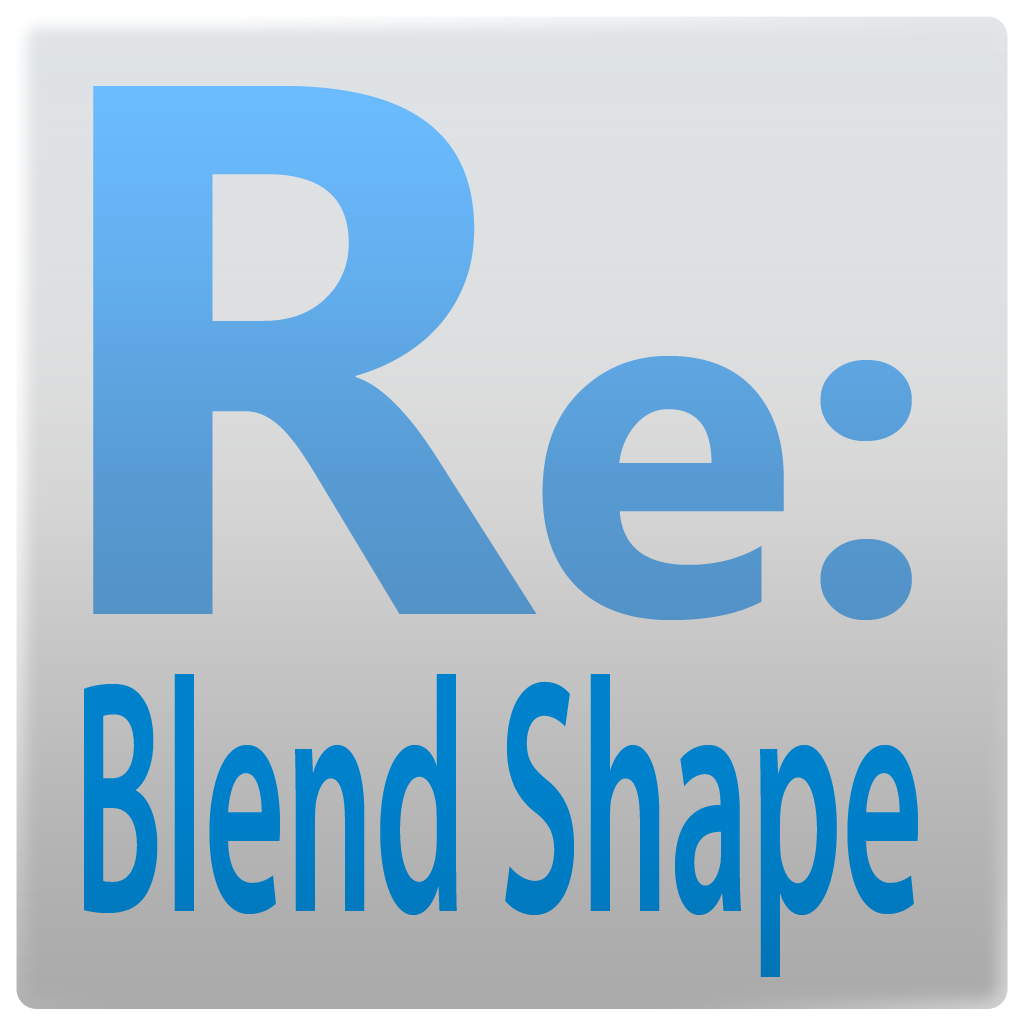
<style>
.page{position:relative;width:1024px;height:1024px}
.page>*{position:absolute;margin:0}
.t1{font:503px "MicrosoftNewTaiLue-Bold";color:#5ca2dd}
.t2{font:754.5px "MicrosoftNewTaiLue-Bold";color:#5ca2dd}
.t3{font:333.4px "MyriadPro-Semibold";color:#007fc8;scale:0.47 1}
</style>
<div class="page">
<p class="t1" style="left:93px;top:86px;width:819px;height:534px"><span class="t2">R</span>e:</p>
<p class="t3" style="left:84px;top:674px;width:834px;height:303px">Blend Shape</p>
</div>
